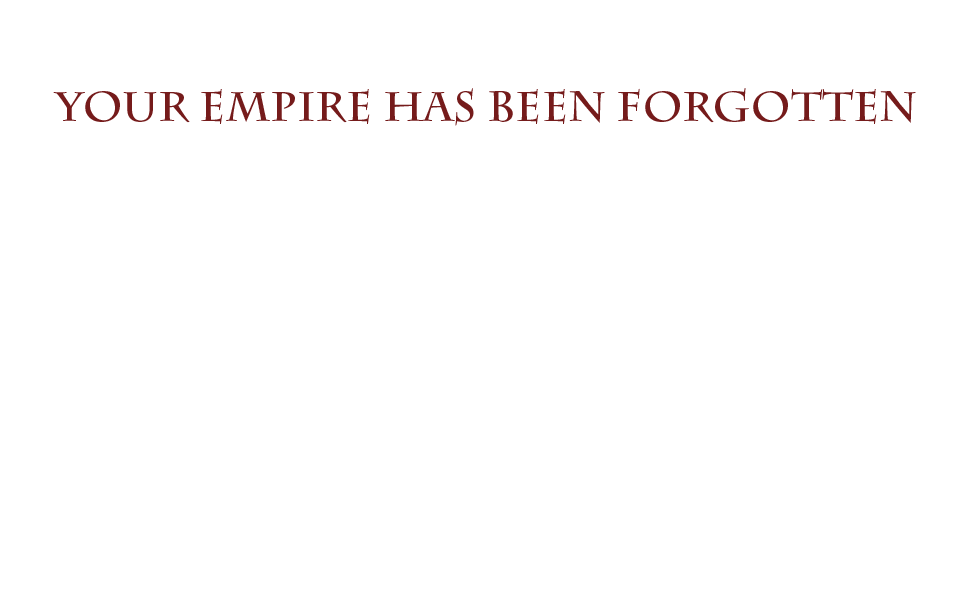
<style>
.page{position:relative;width:960px;height:600px;background:#ffffff}
.page>*{position:absolute;margin:0}
.t1{font:41.7px "CharlemagneStd-Bold";color:#751b1b;text-transform:uppercase}
</style>
<div class="page">
<p class="t1" style="left:53px;top:88px;width:863px;height:38px">Your empire has been forgotten</p>
</div>
